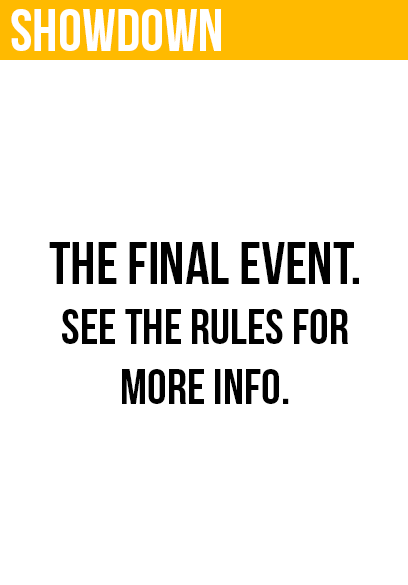
<style>
.page{position:relative;width:408px;height:585px;background:#ffffff}
.page>*{position:absolute;margin:0}
.t1{font:60px "BebasNeue";color:#ffffff}
.t2{font:50px "BebasNeue";color:#000000}
.t3{font:60px "BebasNeue";color:#000000}
</style>
<div class="page">
<p class="t1" style="left:11px;top:9px;width:210px;height:42px">showdown</p>
<p class="t2" style="left:49px;top:242px;width:310px;height:162px;text-align:center"><span class="t3">the final event.<br></span>see the rules for<br>more info.</p>
</div>
